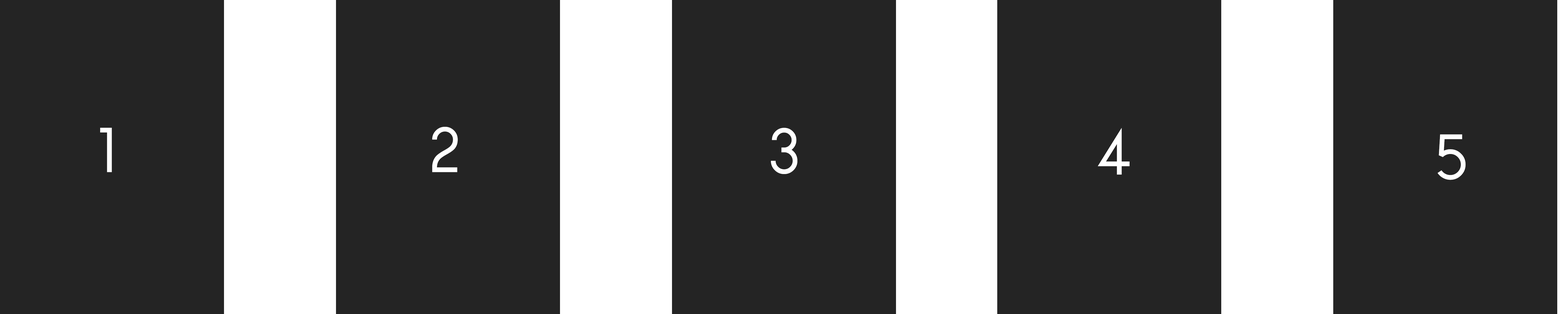
<style>
.page{position:relative;width:1568px;height:314px;background:#242424}
.page>*{position:absolute;margin:0}
.t1{font:59.7px "WatchwordRegularDemo";color:#ffffff}
</style>
<div class="page">
<p class="t1" style="left:100px;top:128px;width:12px;height:44px">1</p>
<p class="t1" style="left:432px;top:127px;width:26px;height:45px">2</p>
<p class="t1" style="left:771px;top:128px;width:26px;height:46px">3</p>
<p class="t1" style="left:1098px;top:128px;width:32px;height:46px">4</p>
<p class="t1" style="left:1437px;top:134px;width:29px;height:46px">5</p>
</div>
